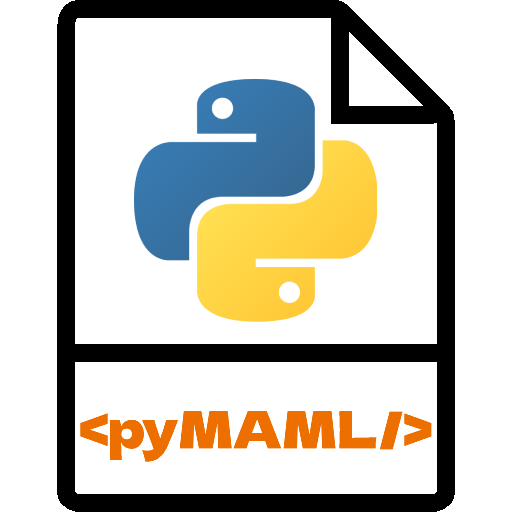
<style>
.page{position:relative;width:512px;height:512px;background:#ffffff}
.page>*{position:absolute;margin:0}
.t1{font:51px "DelaGothicOne-Regular";color:#ec6f00}
</style>
<div class="page">
<p class="t1" style="left:80px;top:411px;width:352px;height:51px">&lt;pyMAML/&gt;</p>
</div>
